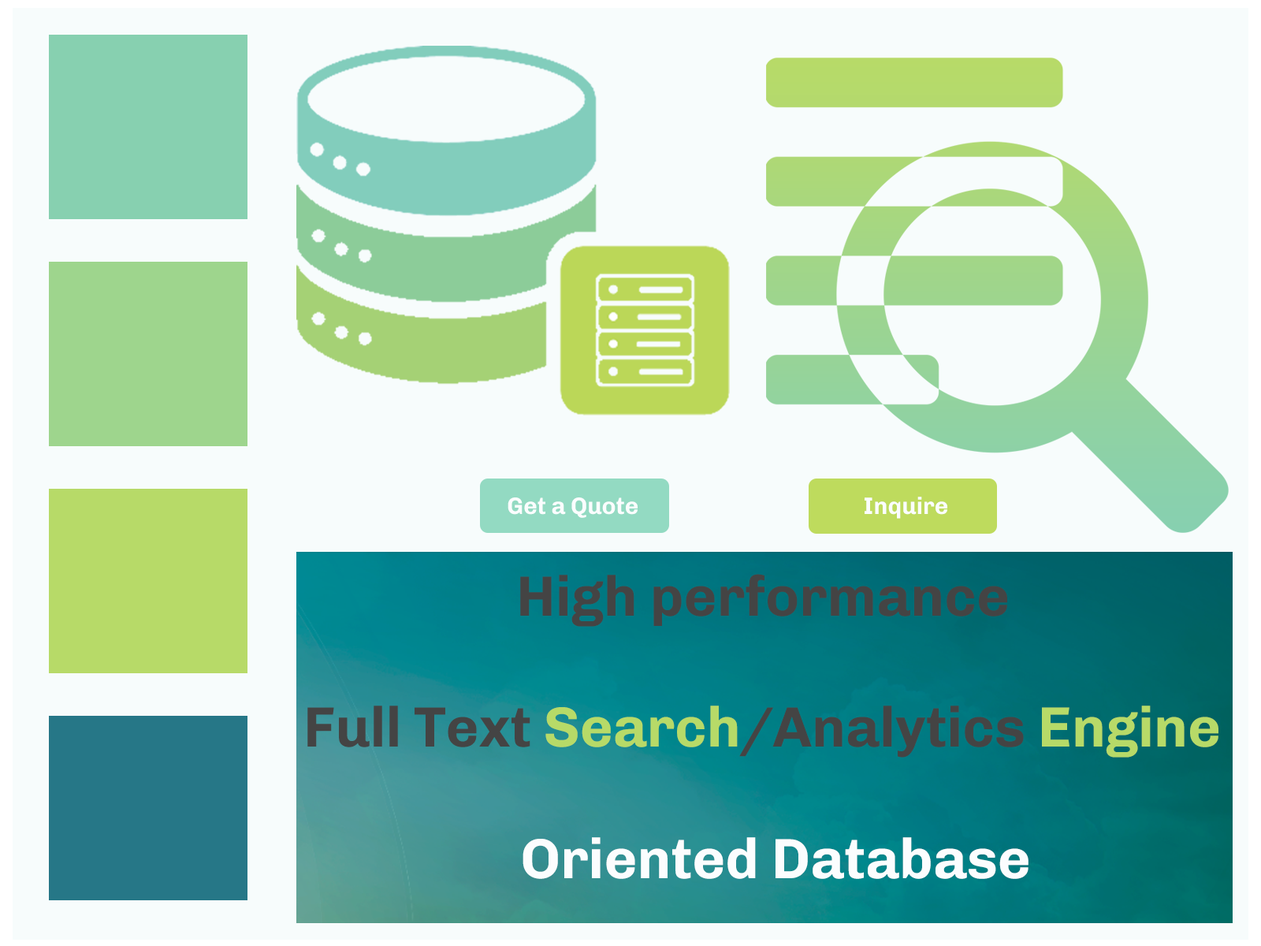
<style>
.page{position:relative;width:1261px;height:946px;background:#f7fcfc}
.page>*{position:absolute;margin:0}
.t1{font:23.6px "Chivo-Bold";color:#fbfdfe}
.t2{font:56.7px "Chivo-Bold";color:#444444}
.t3{font:56.7px "Chivo-Bold";color:#b7da68}
.t4{font:56.7px "Chivo-Bold";color:#fbfdfe}
</style>
<div class="page">
<p class="t1" style="left:508px;top:497px;width:130px;height:21px">Get a Quote</p>
<p class="t1" style="left:865px;top:496px;width:82px;height:23px">Inquire</p>
<p class="t2" style="left:520px;top:574px;width:487px;height:53px">High performance</p>
<p class="t2" style="left:307px;top:705px;width:911px;height:52px">Full Text <span class="t3">Search</span>/Analytics <span class="t3">Engine</span></p>
<p class="t4" style="left:522px;top:837px;width:506px;height:42px">Oriented Database</p>
</div>
